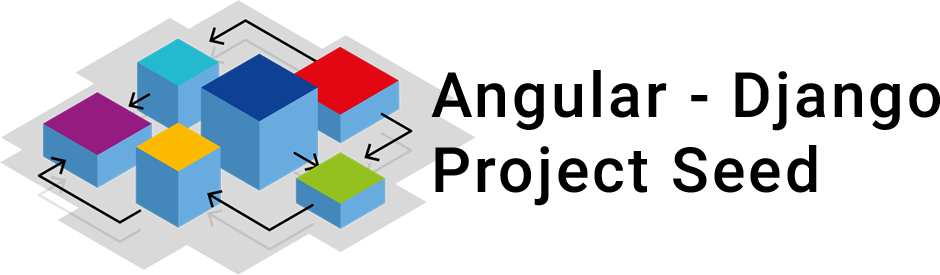
<style>
.page{position:relative;width:940px;height:275px;background:#ffffff}
.page>*{position:absolute;margin:0}
.t1{font:62.5px "Roboto-Medium";letter-spacing:0.05em;color:#000000}
</style>
<div class="page">
<p class="t1" style="left:431px;top:70px;width:509px;height:136px">Angular - Django<br>Project Seed</p>
</div>
